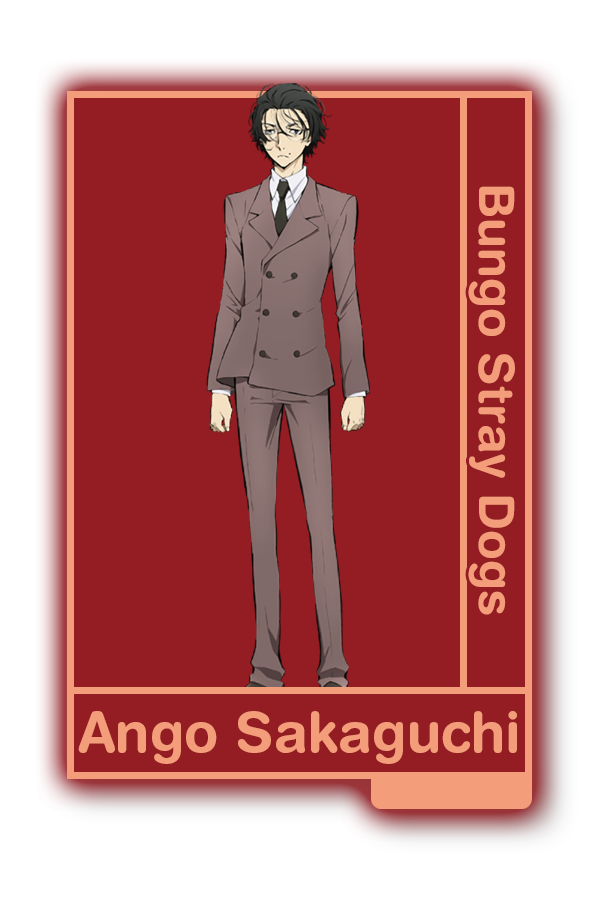
<style>
.page{position:relative;width:600px;height:900px;background:#941d23}
.page>*{position:absolute;margin:0}
.t1{font:48.8px "HelveticaRounded-Bold";color:#f39d7b}
.t2{font:56px "HelveticaRounded-Bold";color:#f39d7b}
</style>
<div class="page">
<p class="t1" style="left:468px;top:186px;width:47px;height:429px;rotate:90deg">Bungo Stray Dogs</p>
<p class="t2" style="left:78px;top:711px;width:439px;height:53px">Ango Sakaguchi</p>
</div>
